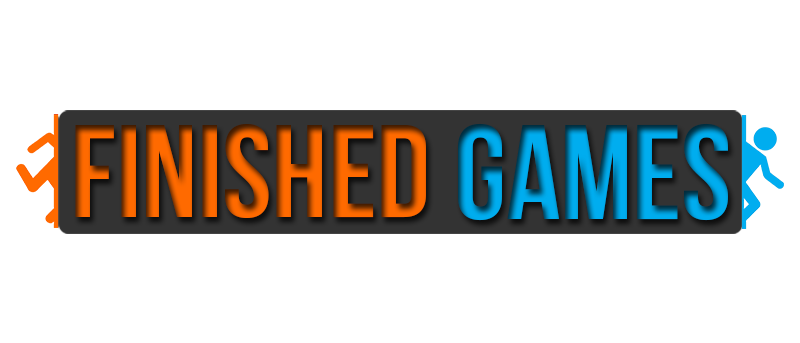
<style>
.page{position:relative;width:800px;height:343px;background:#ffffff}
.page>*{position:absolute;margin:0}
.t1{font:132px "BebasNeue"}
.t2{font:133.8px "BebasNeue"}
</style>
<div class="page">
<p class="t1" style="left:75px;top:124px;width:351px;height:94px">Finished</p>
<p class="t2" style="left:458px;top:123px;width:270px;height:98px">GAMES</p>
</div>
